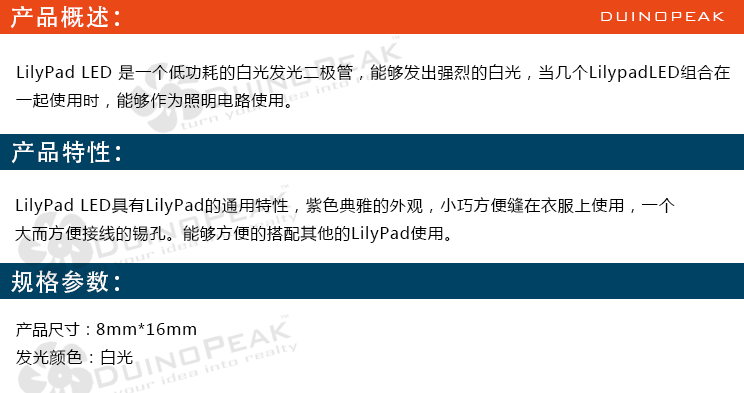
<style>
.page{position:relative;width:744px;height:393px;background:#ffffff}
.page>*{position:absolute;margin:0}
.t1{font:24px "AdobeHeitiStd-Regular";letter-spacing:0.05em;color:#ffffff}
.t2{font:18px "BankGothicBT-Light";letter-spacing:0.05em;color:#ffffff}
.t3{font:16px "MicrosoftYaHei";letter-spacing:0.05em;color:#000000}
.t4{font:16px "MicrosoftYaHei";color:#000000}
</style>
<div class="page">
<p class="t1" style="left:10px;top:6px;width:109px;height:23px">产品概述：</p>
<p class="t2" style="left:601px;top:12px;width:124px;height:9px">DUINOPEAK</p>
<p class="t3" style="left:16px;top:64px;width:714px;height:45px">LilyPad LED 是一个低功耗的白光发光二极管，能够发出强烈的白光，当几个LilypadLED组合在<br>一起使用时，能够作为照明电路使用。</p>
<p class="t1" style="left:11px;top:140px;width:109px;height:24px">产品特性：</p>
<p class="t3" style="left:15px;top:197px;width:660px;height:46px">LilyPad LED具有LilyPad的通用特性，紫色典雅的外观，小巧方便缝在衣服上使用，一个<br>大而方便接线的锡孔。能够方便的搭配其他的LilyPad使用。</p>
<p class="t1" style="left:11px;top:270px;width:108px;height:23px">规格参数：</p>
<p class="t3" style="left:16px;top:322px;width:180px;height:44px"><span class="t4">产品尺寸：</span>8mm*16mm<br>发光颜色：白光</p>
</div>
